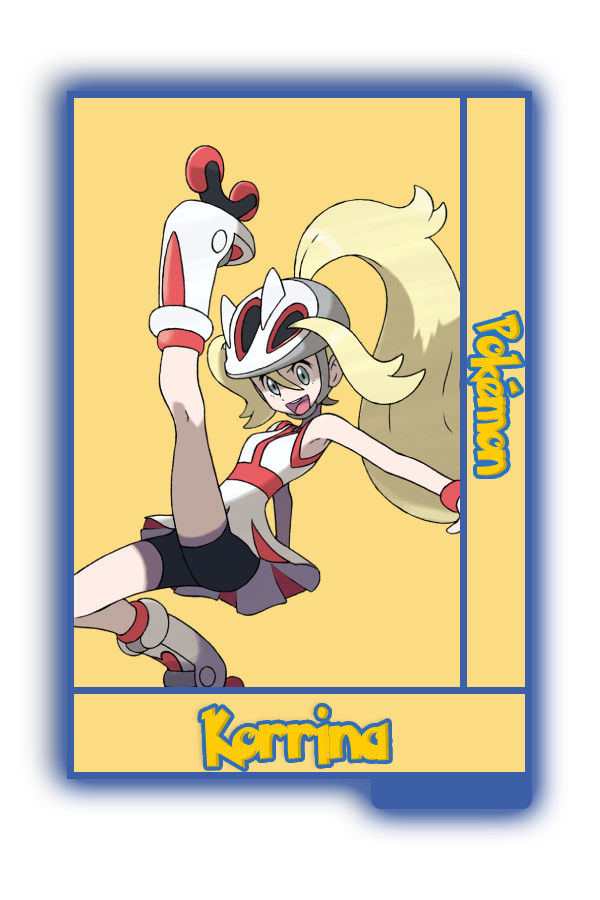
<style>
.page{position:relative;width:600px;height:900px;background:#fbdc83}
.page>*{position:absolute;margin:0}
.t1{font:48.8px "PokemonSolidNormal";color:#ffcb05;scale:0.8 1}
.t2{font:56.6px "PokemonSolidNormal";color:#ffcb05;scale:0.92 1}
</style>
<div class="page">
<p class="t1" style="left:469px;top:313px;width:54px;height:163px;rotate:90deg">Pokémon</p>
<p class="t2" style="left:201px;top:706px;width:188px;height:63px">Korrina</p>
</div>
